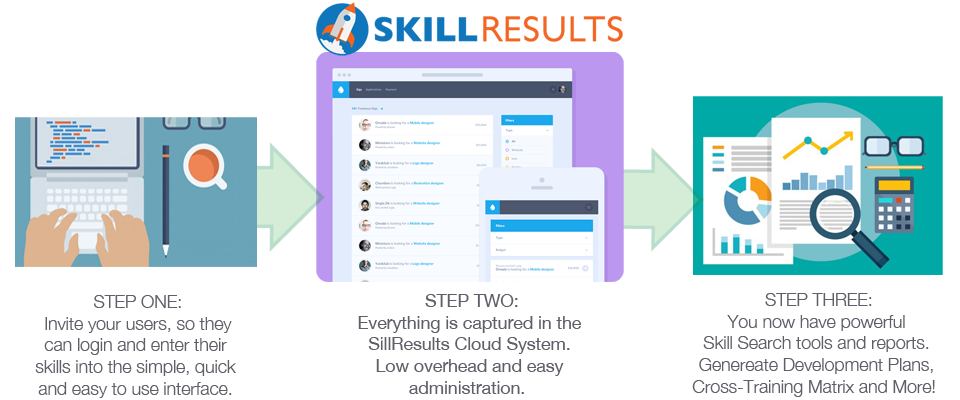
<style>
.page{position:relative;width:960px;height:400px;background:#ffffff}
.page>*{position:absolute;margin:0}
.t1{font:18px "HelveticaNeue";letter-spacing:-0.01em;color:#5e5f68}
.t2{font:18px "HelveticaNeue-Light";letter-spacing:-0.01em;color:#5e5f68}
</style>
<div class="page">
<p class="t1" style="left:358px;top:294px;width:224px;height:100px;text-align:center">STEP TWO:<br>Everything is captured in the <br>SillResults Cloud System. <br>Low overhead and easy <br>administration.</p>
<p class="t2" style="left:692px;top:293px;width:243px;height:104px;text-align:center">STEP THREE:<br>You now have powerful <br>Skill Search tools and reports. <br>Genereate Development Plans, <br>Cross-Training Matrix and More!</p>
<p class="t2" style="left:35px;top:295px;width:201px;height:103px;text-align:center">STEP ONE:<br>Invite your users, so they<br>can login and enter their <br>skills into the simple, quick <br>and easy to use interface.</p>
</div>
